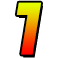
<style>
.page{position:relative;width:60px;height:58px;background:#ffffff}
.page>*{position:absolute;margin:0}
.t1{font:100px "Bitsumishi";letter-spacing:-0.08em;font-style:italic;scale:0.93 1}
</style>
<div class="page">
<p class="t1" style="left:16px;top:2px;width:25px;height:53px">1</p>
</div>
